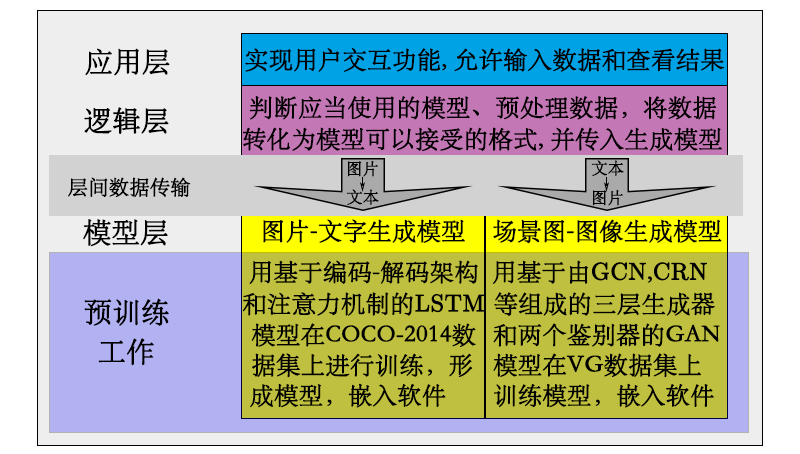
<style>
.page{position:relative;width:800px;height:454px}
.page>*{position:absolute;margin:0}
.t1{font:28px "STSong";color:#000000;font-weight:bold}
.t2{font:24px "STSong";color:#000000;font-weight:bold}
.t3{font:16px "STSong";color:#000000;font-weight:bold}
.t4{font:20px "STSong";color:#000000;font-weight:bold}
.t5{font:24px "Euclid";color:#000000;font-weight:bold}
.t6{font:36px "STSong";color:#000000;font-weight:bold}
</style>
<div class="page">
<p class="t1" style="left:85px;top:48px;width:85px;height:28px">应用层</p>
<p class="t2" style="left:245px;top:48px;width:479px;height:24px">实现用户交互功能, 允许输入数据和查看结果</p>
<p class="t2" style="left:249px;top:95px;width:468px;height:25px">判断应当使用的模型、预处理数据，将数据</p>
<p class="t1" style="left:84px;top:107px;width:85px;height:27px">逻辑层</p>
<p class="t2" style="left:242px;top:127px;width:481px;height:25px">转化为模型可以接受的格式, 并传入生成模型</p>
<p class="t3" style="left:348px;top:160px;width:30px;height:17px">图片</p>
<p class="t3" style="left:591px;top:160px;width:33px;height:16px">文本</p>
<p class="t4" style="left:68px;top:177px;width:123px;height:21px">层间数据传输</p>
<p class="t3" style="left:346px;top:189px;width:33px;height:16px">文本</p>
<p class="t3" style="left:593px;top:189px;width:30px;height:17px">图片</p>
<p class="t1" style="left:83px;top:219px;width:85px;height:28px">模型层</p>
<p class="t2" style="left:263px;top:219px;width:459px;height:25px">图片-文字生成模型    场景图-图像生成模型</p>
<p class="t2" style="left:249px;top:260px;width:458px;height:24px">用基于编码-解码架构  用基于由<span class="t5">GCN</span>,<span class="t5">CRN</span></p>
<p class="t2" style="left:242px;top:292px;width:473px;height:24px"><span class="t4"> </span>和注意力机制的<span class="t5">LSTM </span>等组成的三层生成器</p>
<p class="t1" style="left:84px;top:298px;width:85px;height:28px">预训练</p>
<p class="t2" style="left:251px;top:323px;width:469px;height:24px"><span class="t6"> </span>模型在COCO-2014数  和两个鉴别器的GAN</p>
<p class="t1" style="left:98px;top:338px;width:56px;height:28px">工作</p>
<p class="t2" style="left:252px;top:353px;width:449px;height:25px">据集上进行训练，形   模型在VG数据集上</p>
<p class="t2" style="left:250px;top:383px;width:464px;height:25px">成模型，嵌入软件     训练模型，嵌入软件</p>
</div>
